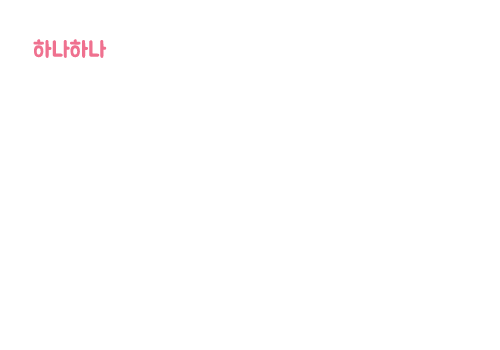
<style>
.page{position:relative;width:500px;height:350px;background:#ffffff}
.page>*{position:absolute;margin:0}
.t1{font:22px "Jua-Regular";color:#ef718f}
</style>
<div class="page">
<p class="t1" style="left:33px;top:39px;width:74px;height:19px">하나하나</p>
</div>
